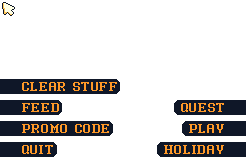
<style>
.page{position:relative;width:246px;height:160px;background:#ffffff}
.page>*{position:absolute;margin:0}
.t1{font:16px "RulerGold";letter-spacing:0.04em;color:#ff9928}
</style>
<div class="page">
<p class="t1" style="left:22px;top:82px;width:95px;height:9px">CLEAR STUFF</p>
<p class="t1" style="left:22px;top:103px;width:37px;height:9px">FEED</p>
<p class="t1" style="left:181px;top:103px;width:43px;height:9px">QUEST</p>
<p class="t1" style="left:22px;top:124px;width:87px;height:9px">PROMO CODE</p>
<p class="t1" style="left:189px;top:124px;width:35px;height:9px">PLAY</p>
<p class="t1" style="left:22px;top:145px;width:31px;height:9px">QUIT</p>
<p class="t1" style="left:164px;top:145px;width:60px;height:9px">HOLIDAY</p>
</div>
